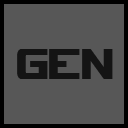
<style>
.page{position:relative;width:128px;height:128px;background:#575757}
.page>*{position:absolute;margin:0}
.t1{font:48px "SpaceMarine-Nominal";letter-spacing:-0.06em;color:#141414;scale:0.72 1}
</style>
<div class="page">
<p class="t1" style="left:17px;top:49px;width:96px;height:30px">gEN</p>
</div>
